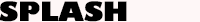
<style>
.page{position:relative;width:200px;height:22px;background:#fef7f7}
.page>*{position:absolute;margin:0}
.t1{font:26.2px "Roblox2017";color:#000000}
</style>
<div class="page">
<p class="t1" style="left:0px;top:1px;width:127px;height:21px">SPLASH</p>
</div>
